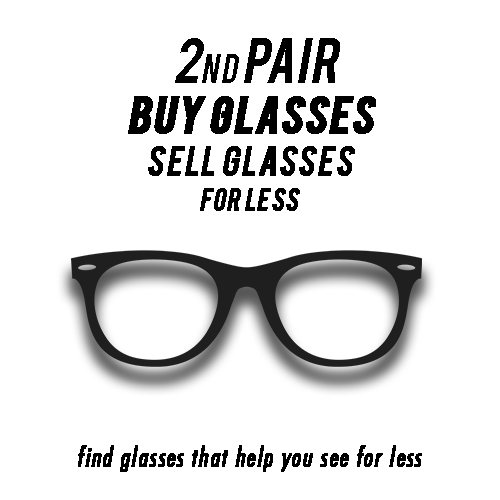
<style>
.page{position:relative;width:500px;height:500px;background:#ffffff}
.page>*{position:absolute;margin:0}
.t1{font:12px "Bebas";letter-spacing:0.015em;color:#000000;font-style:italic}
.t2{font:33.3px "Bebas";letter-spacing:0.015em;color:#000000;font-style:italic}
.t3{font:41.7px "Bebas";letter-spacing:0.015em;color:#000000;font-weight:bold;font-style:italic}
.t4{font:33.3px "Bebas";letter-spacing:0.015em;color:#000000;font-weight:bold;font-style:italic}
.t5{font:25px "Bebas";letter-spacing:0.015em;color:#000000;font-weight:bold;font-style:italic}
.t6{font:25px "Futura-CondensedMedium";letter-spacing:0.015em;color:#000000;font-weight:bold;font-style:italic}
</style>
<div class="page">
<p class="t1" style="left:175px;top:38px;width:165px;height:45px">2<span class="t2">nd</span> Pair</p>
<p class="t3" style="left:128px;top:96px;width:248px;height:38px">buy glasses</p>
<p class="t4" style="left:148px;top:146px;width:207px;height:30px">Sell glasses</p>
<p class="t5" style="left:200px;top:188px;width:100px;height:23px">For Less</p>
<p class="t6" style="left:78px;top:445px;width:344px;height:27px">find glasses that help you see for less</p>
</div>
